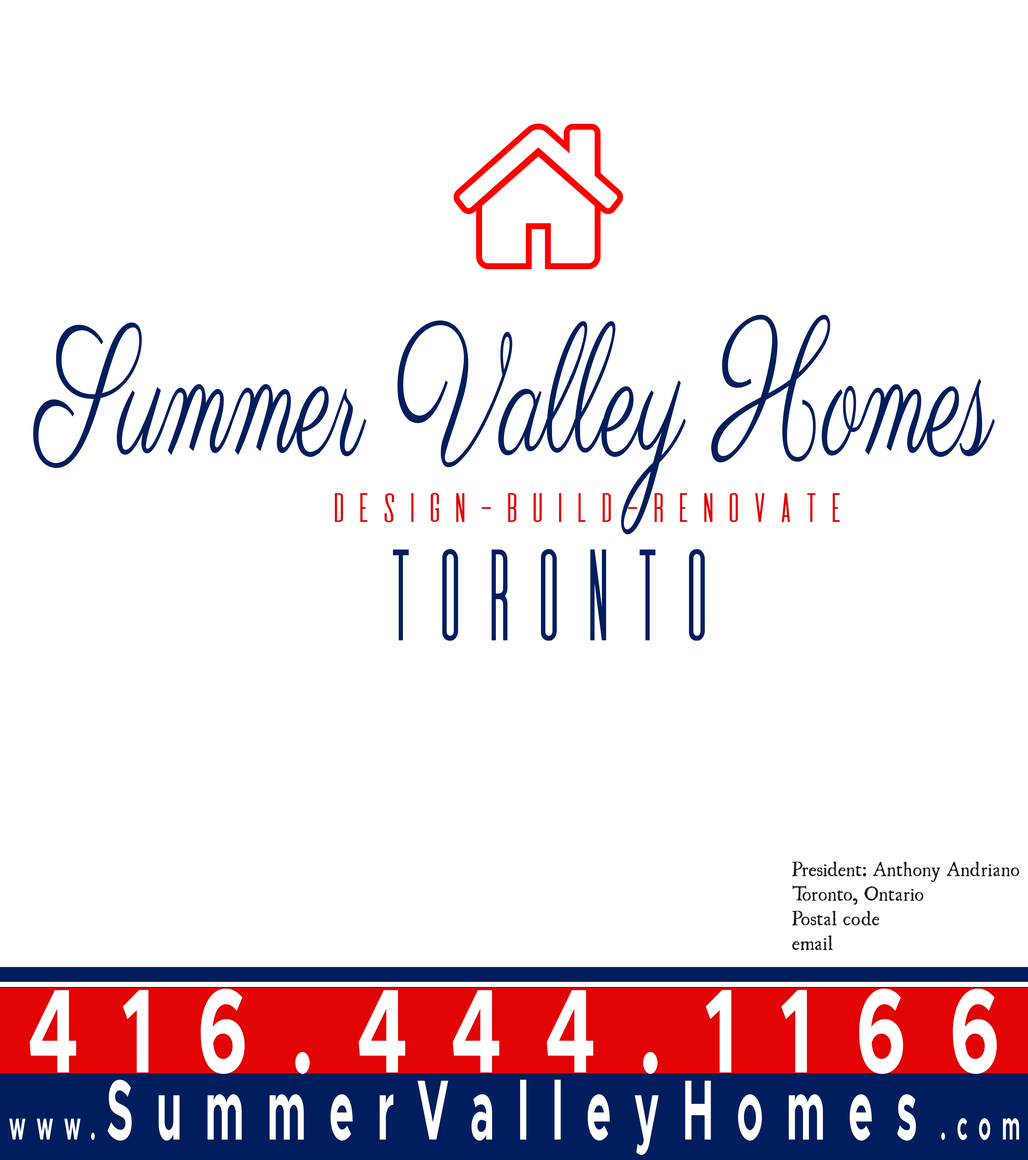
<style>
.page{position:relative;width:1028px;height:1160px;background:#ffffff}
.page>*{position:absolute;margin:0}
.t1{font:184.4px "Parisienne-Regular";color:#001e5d;scale:0.55 1}
.t2{font:36px "DeValencia-Regular";color:#e20404;scale:1.2 1}
.t3{font:113.5px "DeValencia-Regular";color:#001e5d;scale:0.74 1}
.t4{font:18.2px "UglyQua";color:#1e1e1e}
.t5{font:120px "Metropolis-Bold";letter-spacing:0.542em;color:#ffffff;scale:0.66 1}
.t6{font:85.7px "Metropolis-Bold";letter-spacing:0.542em;color:#ffffff;scale:0.49 1}
.t7{font:40.5px "Metropolis-Bold";letter-spacing:0.542em;color:#ffffff;scale:0.49 1}
</style>
<div class="page">
<p class="t1" style="left:33px;top:315px;width:962px;height:220px">Summer Valley Homes</p>
<p class="t2" style="left:335px;top:493px;width:505px;height:30px">Design-Build-Renovate</p>
<p class="t3" style="left:393px;top:549px;width:312px;height:92px">Toronto</p>
<p class="t4" style="left:792px;top:862px;width:227px;height:89px">President: Anthony Andriano<br>Toronto, Ontario<br>Postal code<br>email</p>
<p class="t5" style="left:30px;top:989px;width:967px;height:85px">416.444.1166</p>
<p class="t6" style="left:9px;top:1080px;width:1010px;height:75px"><span class="t7">www.</span>SummerValleyHomes<span class="t7">.com</span></p>
</div>
